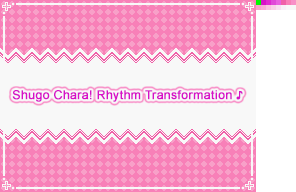
<style>
.page{position:relative;width:296px;height:192px;background:#f8f8f8}
.page>*{position:absolute;margin:0}
.t1{font:12px "ArialMT";letter-spacing:0.015em;color:#d810c8;font-weight:bold}
</style>
<div class="page">
<p class="t1" style="left:12px;top:90px;width:231px;height:12px">Shugo Chara! Rhythm Transformation ♪</p>
</div>
